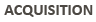
<style>
.page{position:relative;width:96px;height:22px;background:#ffffff}
.page>*{position:absolute;margin:0}
.t1{font:16px "Calibri-Bold";color:#4c4843}
</style>
<div class="page">
<p class="t1" style="left:4px;top:5px;width:89px;height:12px">ACQUISITION</p>
</div>
